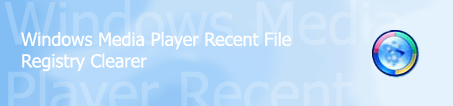
<style>
.page{position:relative;width:453px;height:106px}
.page>*{position:absolute;margin:0}
.t1{font:18px "Tahoma";color:#ffffff}
</style>
<div class="page">
<p class="t1" style="left:21px;top:32px;width:270px;height:40px">Windows Media Player Recent File Registry Clearer</p>
</div>
